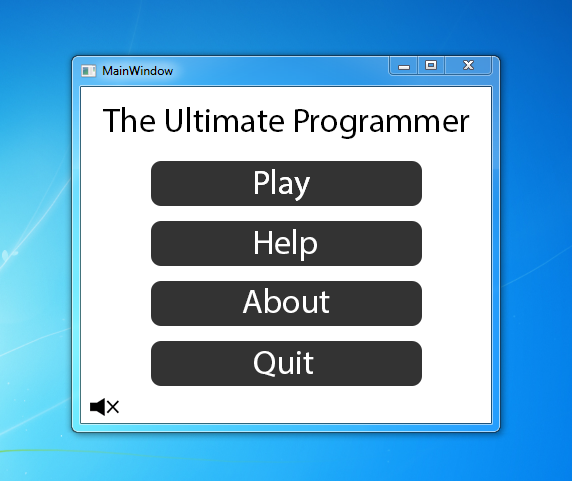
<style>
.page{position:relative;width:572px;height:481px;background:#ffffff}
.page>*{position:absolute;margin:0}
.t1{font:34px "MyriadPro-Regular";color:#000000}
.t2{font:34px "MyriadPro-Regular";color:#ffffff}
</style>
<div class="page">
<p class="t1" style="left:103px;top:107px;width:367px;height:32px">The Ultimate Programmer</p>
<p class="t2" style="left:255px;top:169px;width:55px;height:32px">Play</p>
<p class="t2" style="left:255px;top:169px;width:55px;height:32px">Play</p>
<p class="t2" style="left:255px;top:229px;width:62px;height:32px">Help</p>
<p class="t2" style="left:242px;top:288px;width:88px;height:25px">About</p>
<p class="t2" style="left:254px;top:351px;width:60px;height:26px">Quit</p>
</div>
